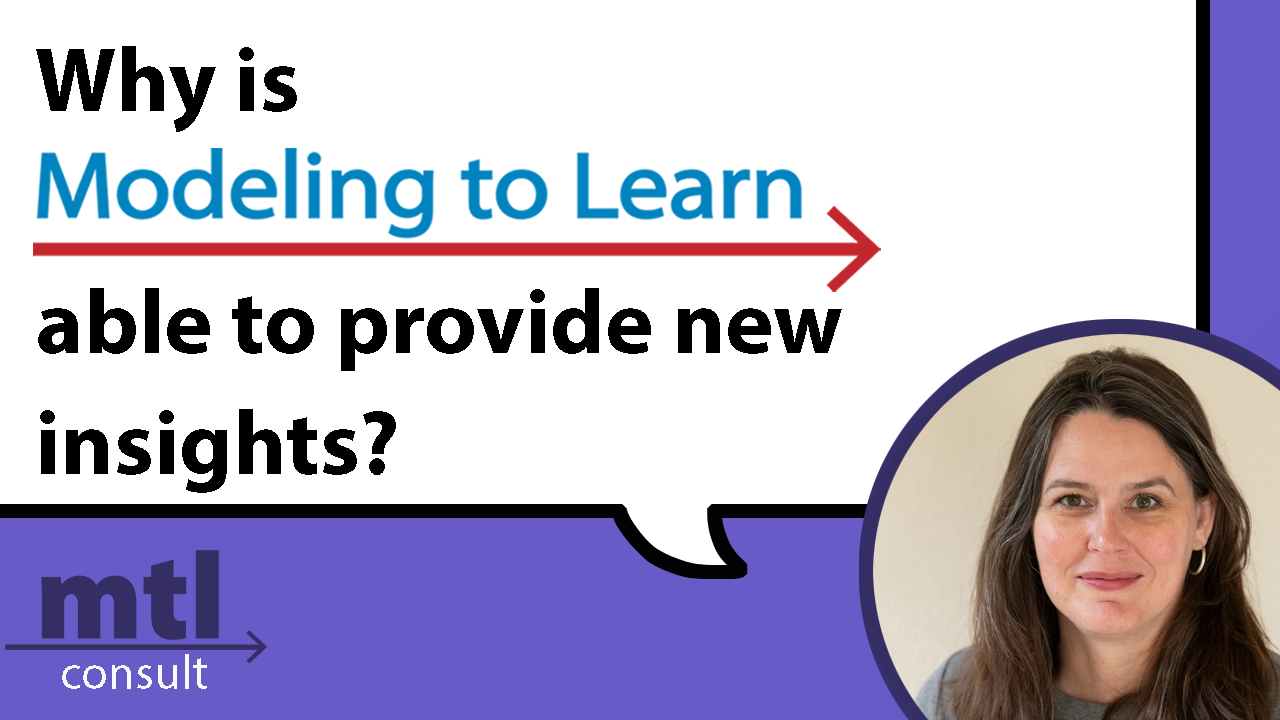
<style>
.page{position:relative;width:1280px;height:720px;background:#ffffff}
.page>*{position:absolute;margin:0}
.t1{font:91.7px "MyriadPro-Bold";color:#000000}
</style>
<div class="page">
<p class="t1" style="left:36px;top:46px;width:806px;height:447px">Why is <br><br>able to provide new<br>insights?</p>
</div>
